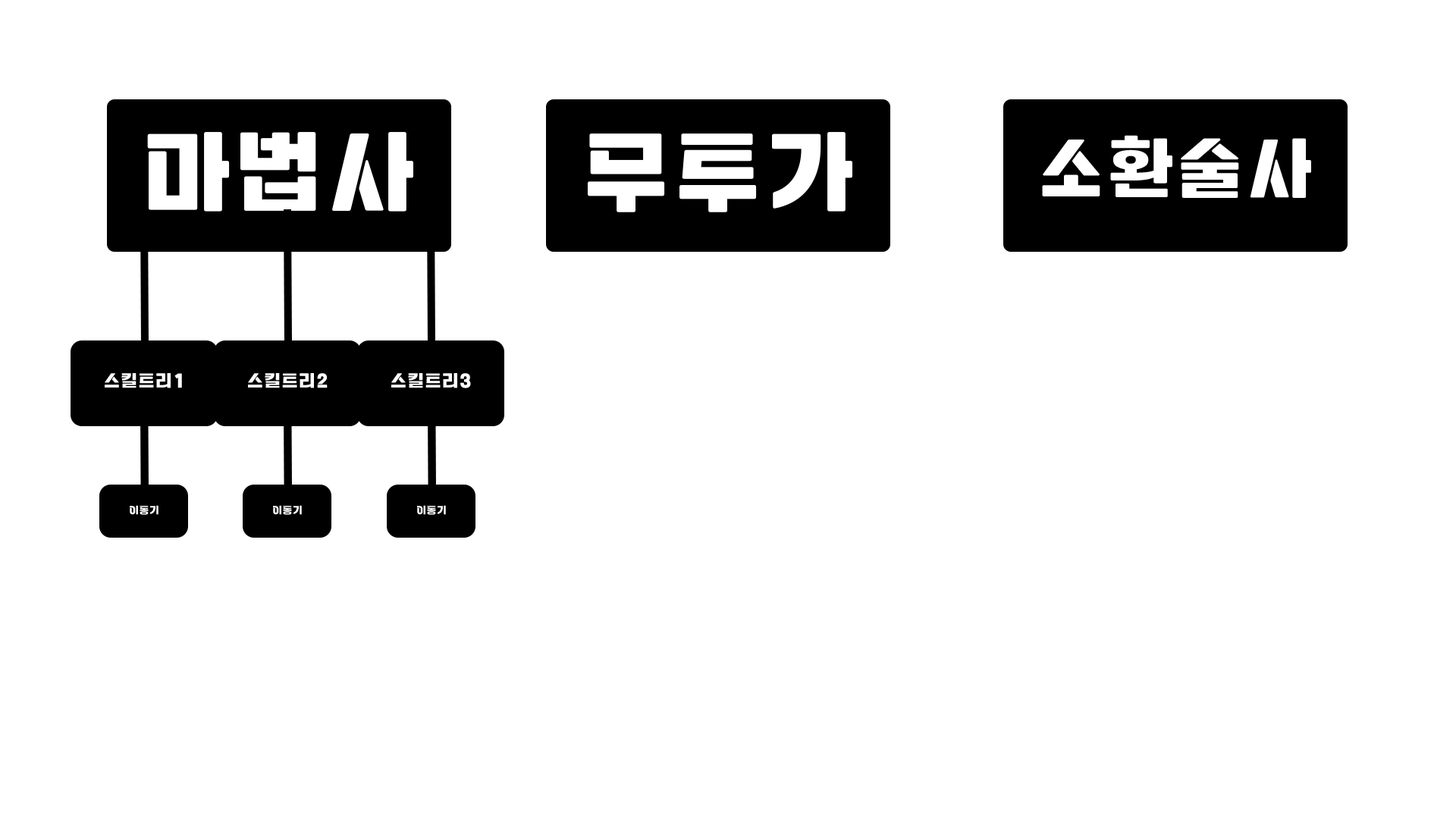
<style>
.page{position:relative;width:1456px;height:819px;background:#ffffff}
.page>*{position:absolute;margin:0}
.t1{font:97.1px "Tenada";letter-spacing:0.07em;color:#ffffff}
.t2{font:72.8px "Tenada";letter-spacing:0.07em;color:#ffffff}
.t3{font:18.2px "Tenada";letter-spacing:0.07em;color:#ffffff}
.t4{font:10.7px "Tenada";letter-spacing:0.07em;color:#ffffff}
</style>
<div class="page">
<p class="t1" style="left:147px;top:132px;width:266px;height:80px">마법사</p>
<p class="t1" style="left:588px;top:132px;width:264px;height:80px">무투가</p>
<p class="t2" style="left:1042px;top:135px;width:269px;height:63px">소환술사</p>
<p class="t3" style="left:105px;top:373px;width:77px;height:15px">스킬트리1</p>
<p class="t3" style="left:248px;top:373px;width:80px;height:15px">스킬트리2</p>
<p class="t3" style="left:391px;top:373px;width:80px;height:15px">스킬트리3</p>
<p class="t4" style="left:130px;top:505px;width:28px;height:10px">이동기</p>
<p class="t4" style="left:273px;top:505px;width:29px;height:10px">이동기</p>
<p class="t4" style="left:417px;top:505px;width:29px;height:10px">이동기</p>
</div>
